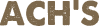
<style>
.page{position:relative;width:100px;height:26px;background:#ffffff}
.page>*{position:absolute;margin:0}
.t1{font:36px "ALoveofThunder";color:#7c684c}
</style>
<div class="page">
<p class="t1" style="left:0px;top:0px;width:99px;height:26px">ach’s</p>
</div>
